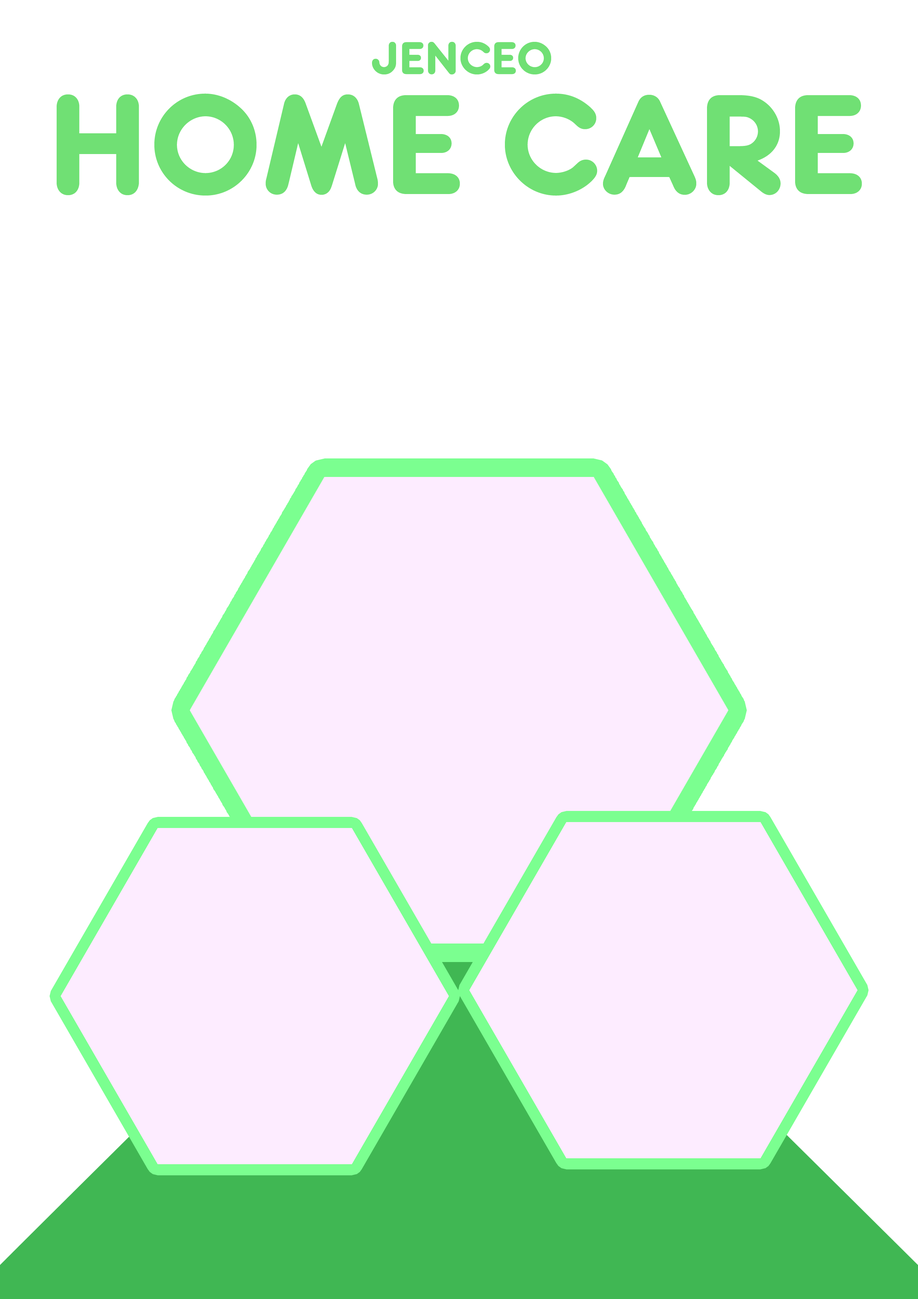
<style>
.page{position:relative;width:918px;height:1299px;background:#ffffff}
.page>*{position:absolute;margin:0}
.t1{font:47.9px "FrankfurterMediumStd";color:#70e074;text-transform:uppercase}
.t2{font:148.3px "FrankfurterMediumStd";color:#70e074;text-transform:uppercase}
</style>
<div class="page">
<p class="t1" style="left:372px;top:42px;width:179px;height:32px">JENCEO</p>
<p class="t2" style="left:57px;top:93px;width:805px;height:103px">HOME CARE</p>
</div>
